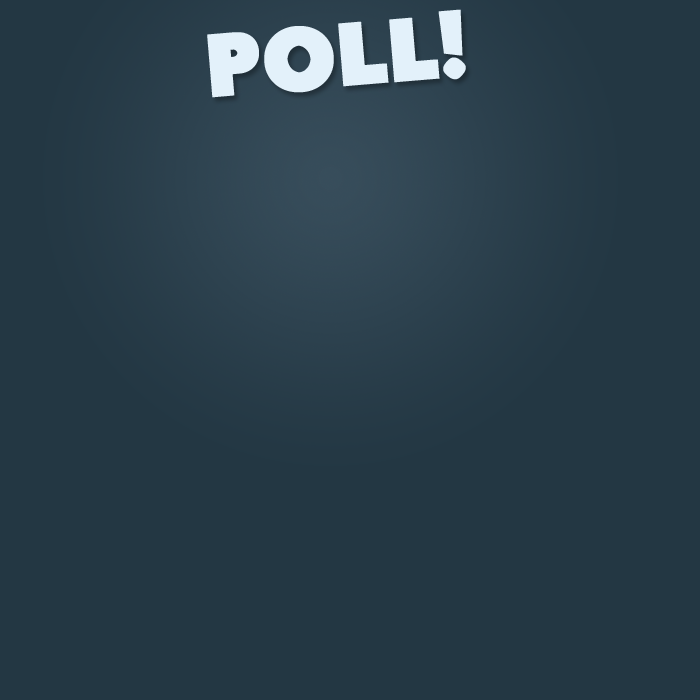
<style>
.page{position:relative;width:700px;height:700px;background:#233743}
.page>*{position:absolute;margin:0}
.t1{font:165px "Agenda-Black";color:#e3f1fa;text-transform:uppercase;font-weight:bold}
</style>
<div class="page">
<p class="t1" style="left:207px;top:9px;width:259px;height:89px;rotate:-5deg">POLL!</p>
</div>
